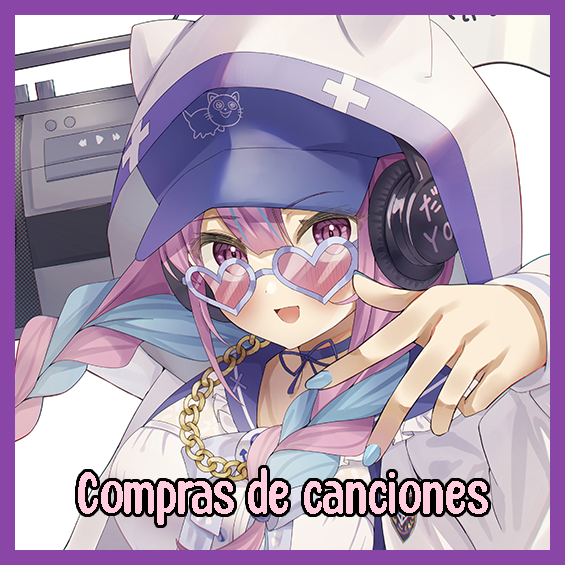
<style>
.page{position:relative;width:565px;height:565px}
.page>*{position:absolute;margin:0}
.t1{font:64.9px "HoneyNotes-Regular";color:#ffcddd}
</style>
<div class="page">
<p class="t1" style="left:78px;top:468px;width:410px;height:57px">Compras de canciones</p>
</div>
